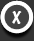
<style>
.page{position:relative;width:34px;height:41px;background:#434343}
.page>*{position:absolute;margin:0}
.t1{font:21.6px "MarkerFelt-Thin";color:#ffffff}
</style>
<div class="page">
<p class="t1" style="left:12px;top:11px;width:10px;height:13px">x</p>
<p class="t1" style="left:12px;top:11px;width:10px;height:13px">x</p>
</div>
